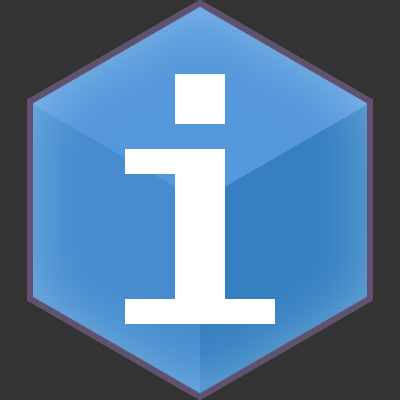
<style>
.page{position:relative;width:400px;height:400px;background:#333333}
.page>*{position:absolute;margin:0}
.t1{font:320px "Fixedsys";color:#ffffff}
</style>
<div class="page">
<p class="t1" style="left:125px;top:74px;width:150px;height:250px">i</p>
</div>
